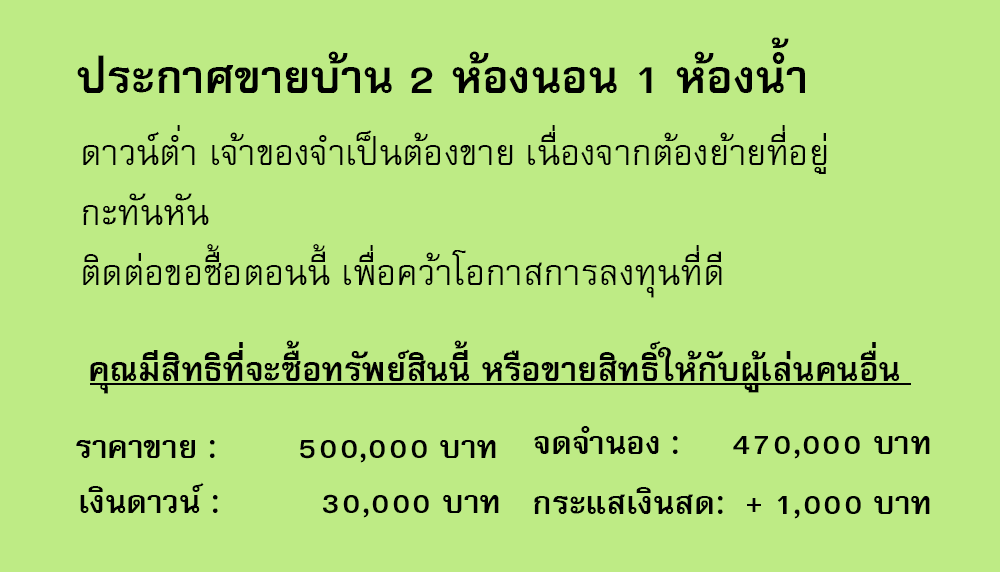
<style>
.page{position:relative;width:1000px;height:572px;background:#beeb85}
.page>*{position:absolute;margin:0}
.t1{font:64px "FreesiaUPCBold";color:#000000}
.t2{font:50px/60px "FreesiaUPC";color:#000000}
.t3{font:47px "FreesiaUPCBold";color:#000000}
.t4{font:45px "FreesiaUPCBold";color:#000000}
</style>
<div class="page">
<p class="t1" style="left:77px;top:37px;width:728px;height:56px">ประกาศขายบ้าน 2 ห้องนอน 1 ห้องน้ำ</p>
<p class="t2" style="left:83px;top:125px;width:744px;height:173px">ดาวน์ต่ำ เจ้าของจำเป็นต้องขาย เนื่องจากต้องย้ายที่อยู่<br>กะทันหัน<br>ติดต่อขอซื้อตอนนี้ เพื่อคว้าโอกาสการลงทุนที่ดี</p>
<p class="t3" style="left:90px;top:340px;width:810px;height:54px">คุณมีสิทธิที่จะซื้อทรัพย์สินนี้ หรือขายสิทธิ์ให้กับผู้เล่นคนอื่น</p>
<p class="t4" style="left:534px;top:426px;width:396px;height:33px">จดจำนอง :     470,000 บาท</p>
<p class="t4" style="left:76px;top:440px;width:420px;height:23px">ราคาขาย :        500,000 บาท</p>
<p class="t4" style="left:80px;top:482px;width:419px;height:36px">เงินดาวน์ :          30,000 บาท</p>
<p class="t4" style="left:534px;top:487px;width:396px;height:32px">กระแสเงินสด:  + 1,000 บาท</p>
</div>
